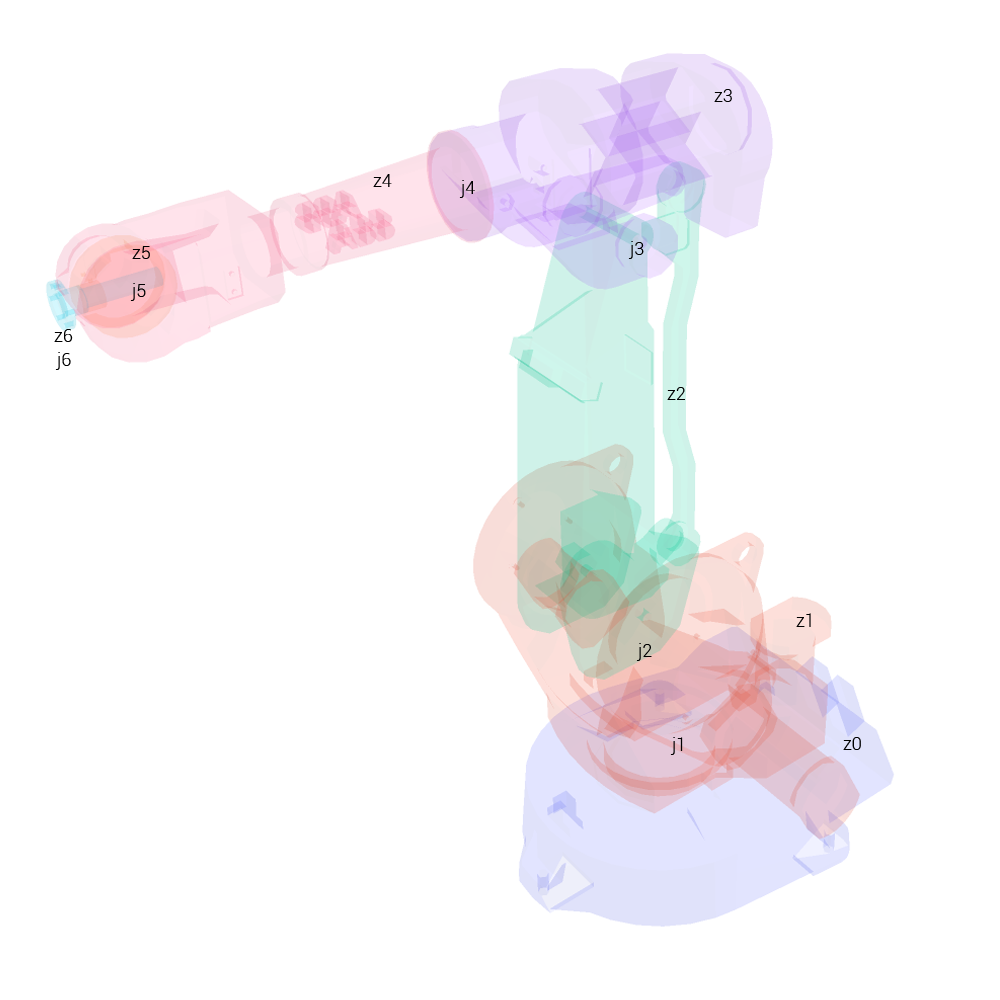
<style>
.page{position:relative;width:1000px;height:1000px;background:#ffffff}
.page>*{position:absolute;margin:0}
.t1{font:18px "Roboto-Light";color:#000000}
</style>
<div class="page">
<p class="t1" style="left:714px;top:89px;width:18px;height:13px">z3</p>
<p class="t1" style="left:373px;top:174px;width:19px;height:13px">z4</p>
<p class="t1" style="left:459px;top:180px;width:16px;height:18px">j4</p>
<p class="t1" style="left:132px;top:246px;width:18px;height:13px">z5</p>
<p class="t1" style="left:628px;top:241px;width:16px;height:18px">j3</p>
<p class="t1" style="left:130px;top:283px;width:16px;height:18px">j5</p>
<p class="t1" style="left:54px;top:329px;width:19px;height:13px">z6</p>
<p class="t1" style="left:55px;top:352px;width:16px;height:18px">j6</p>
<p class="t1" style="left:667px;top:387px;width:18px;height:13px">z2</p>
<p class="t1" style="left:796px;top:613px;width:15px;height:14px">z1</p>
<p class="t1" style="left:636px;top:643px;width:16px;height:18px">j2</p>
<p class="t1" style="left:670px;top:737px;width:13px;height:18px">j1</p>
<p class="t1" style="left:843px;top:737px;width:18px;height:13px">z0</p>
</div>
